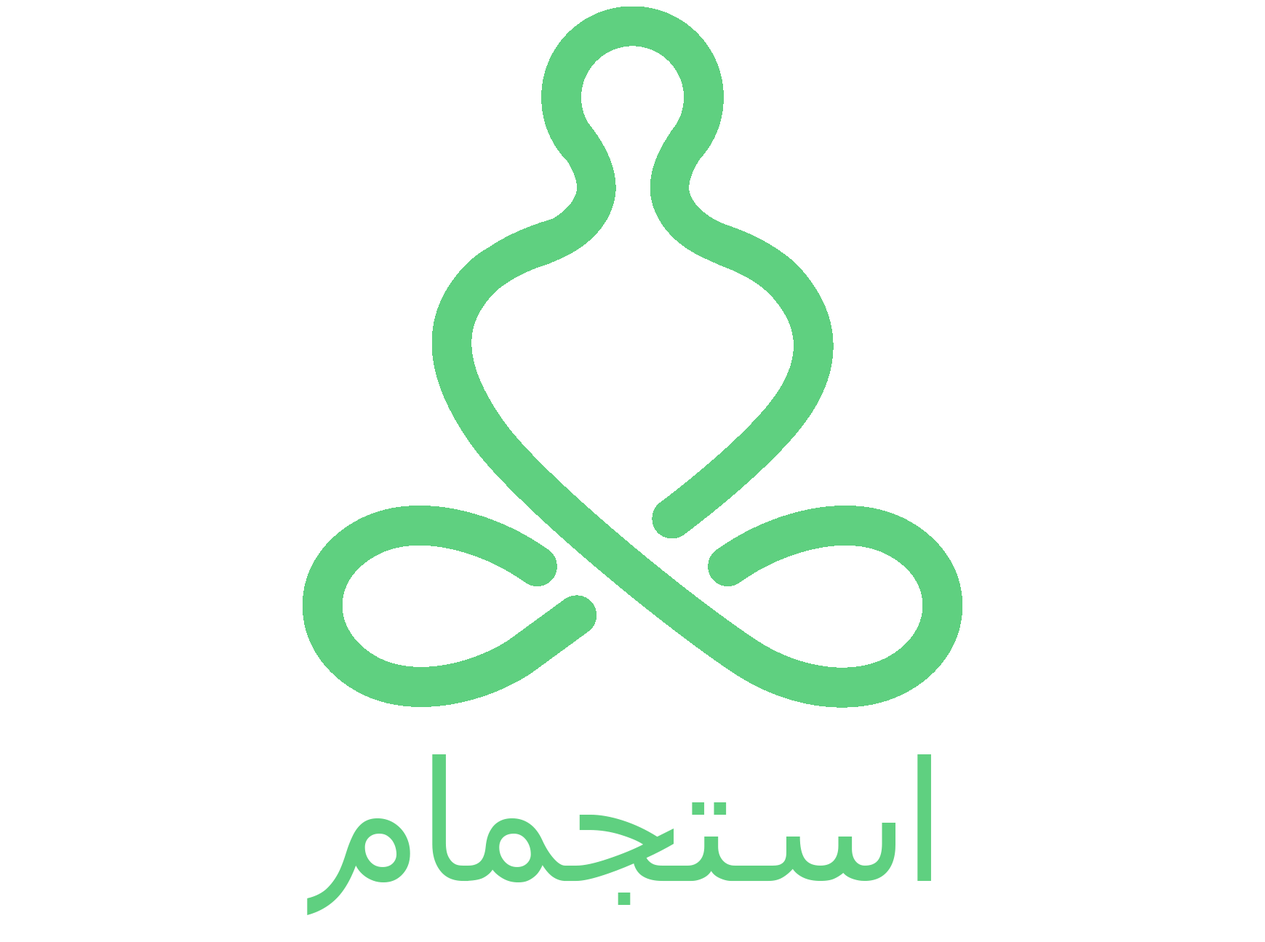
<style>
.page{position:relative;width:1265px;height:942px;background:#ffffff}
.page>*{position:absolute;margin:0}
.t1{font:166.8px "Tahoma";color:#5fd080}
</style>
<div class="page">
<p class="t1" style="left:307px;top:755px;width:624px;height:160px">استجمام</p>
</div>
